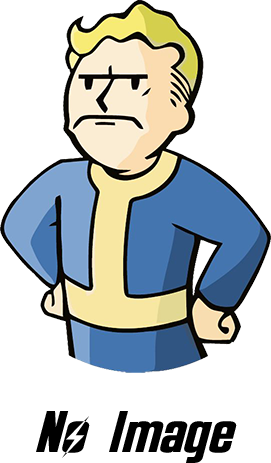
<style>
.page{position:relative;width:271px;height:463px;background:#ffffff}
.page>*{position:absolute;margin:0}
.t1{font:60px "Overseer-Italic";color:#000000}
</style>
<div class="page">
<p class="t1" style="left:36px;top:411px;width:201px;height:52px">No Image</p>
</div>
